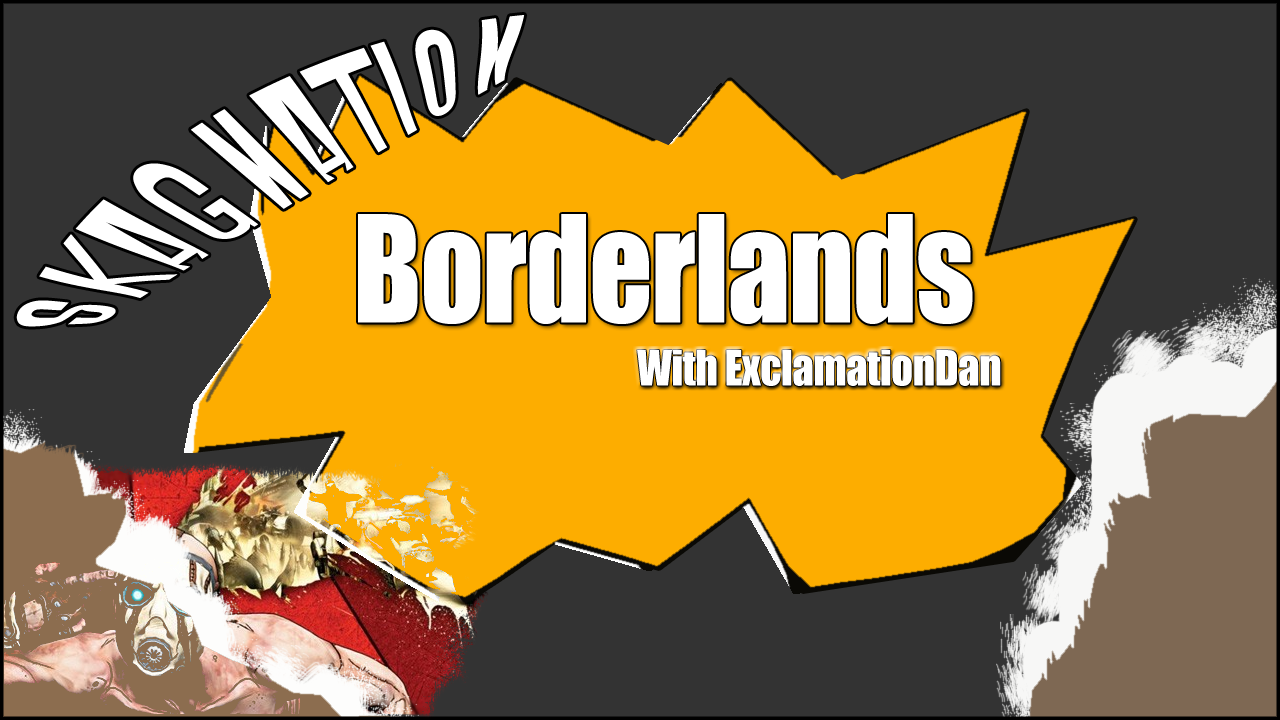
<style>
.page{position:relative;width:1280px;height:720px;background:#333333}
.page>*{position:absolute;margin:0}
.t1{font:75.6px "Impact";letter-spacing:-0.01em;color:#ffffff;scale:1.25 1}
.t2{font:137.1px "Impact";letter-spacing:-0.01em;color:#ffffff;scale:0.91 1}
.t3{font:45.1px "Impact";letter-spacing:-0.01em;color:#ffffff;scale:0.95 1}
</style>
<div class="page">
<p class="t1" style="left:16px;top:15px;width:509px;height:312px;rotate:-31deg">SKAG NATION</p>
<p class="t2" style="left:358px;top:214px;width:615px;height:110px">Borderlands</p>
<p class="t3" style="left:637px;top:350px;width:364px;height:36px">With ExclamationDan</p>
</div>
